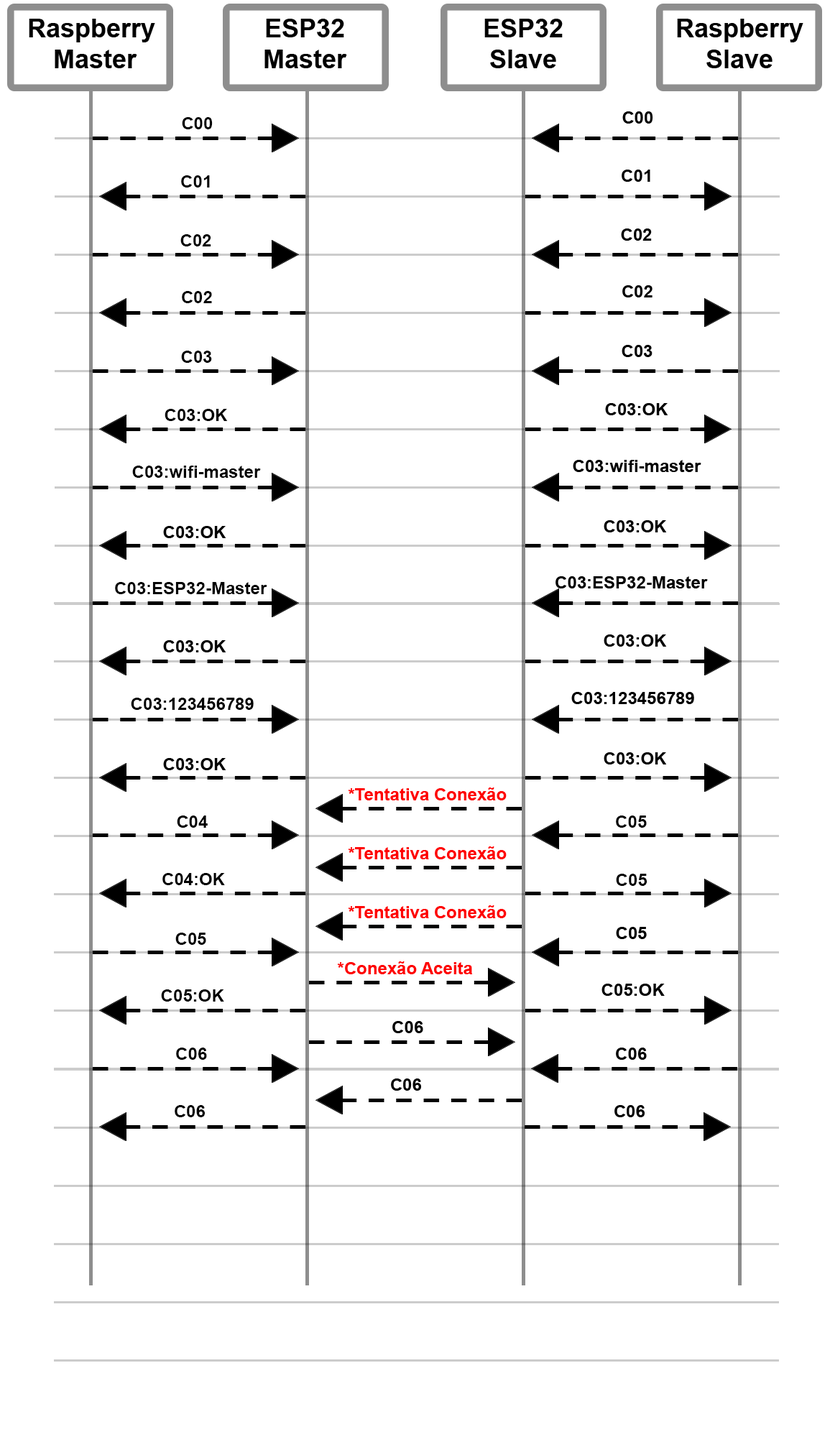
<style>
.page{position:relative;width:830px;height:1437px;background:#ffffff}
.page>*{position:absolute;margin:0}
.t1{font:17.2px "Arial-BoldMT";color:#000000}
</style>
<div class="page">
<p class="t1" style="left:182px;top:117px;width:31px;height:12px">C00</p>
<p class="t1" style="left:181px;top:175px;width:29px;height:13px">C01</p>
<p class="t1" style="left:180px;top:234px;width:31px;height:12px">C02</p>
<p class="t1" style="left:182px;top:291px;width:30px;height:12px">C02</p>
<p class="t1" style="left:181px;top:351px;width:31px;height:12px">C03</p>
<p class="t1" style="left:165px;top:409px;width:63px;height:12px">C03:OK</p>
<p class="t1" style="left:132px;top:466px;width:129px;height:12px">C03:wifi-master</p>
<p class="t1" style="left:115px;top:582px;width:152px;height:12px">C03:ESP32-Master</p>
<p class="t1" style="left:131px;top:698px;width:123px;height:12px">C03:123456789</p>
<p class="t1" style="left:177px;top:815px;width:31px;height:13px">C04</p>
<p class="t1" style="left:616px;top:815px;width:31px;height:13px">C05</p>
<p class="t1" style="left:162px;top:873px;width:63px;height:12px">C04:OK</p>
<p class="t1" style="left:616px;top:874px;width:31px;height:12px">C05</p>
<p class="t1" style="left:175px;top:933px;width:31px;height:12px">C05</p>
<p class="t1" style="left:161px;top:989px;width:63px;height:13px">C05:OK</p>
<p class="t1" style="left:176px;top:1048px;width:31px;height:12px">C06</p>
<p class="t1" style="left:175px;top:1105px;width:30px;height:12px">C06</p>
</div>
